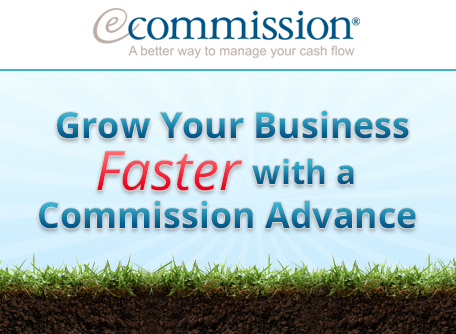
<style>
.page{position:relative;width:456px;height:334px}
.page>*{position:absolute;margin:0}
.t1{font:35.8px "OpenSans-Bold"}
.t2{font:54.3px "OpenSans-Italic"}
.t3{font:33.1px "OpenSans-Bold"}
</style>
<div class="page">
<p class="t1" style="left:57px;top:110px;width:352px;height:29px">Grow Your Business</p>
<p class="t2" style="left:97px;top:151px;width:145px;height:40px">Faster</p>
<p class="t3" style="left:252px;top:158px;width:102px;height:27px">with a</p>
<p class="t1" style="left:39px;top:200px;width:377px;height:29px">Commission Advance</p>
</div>
